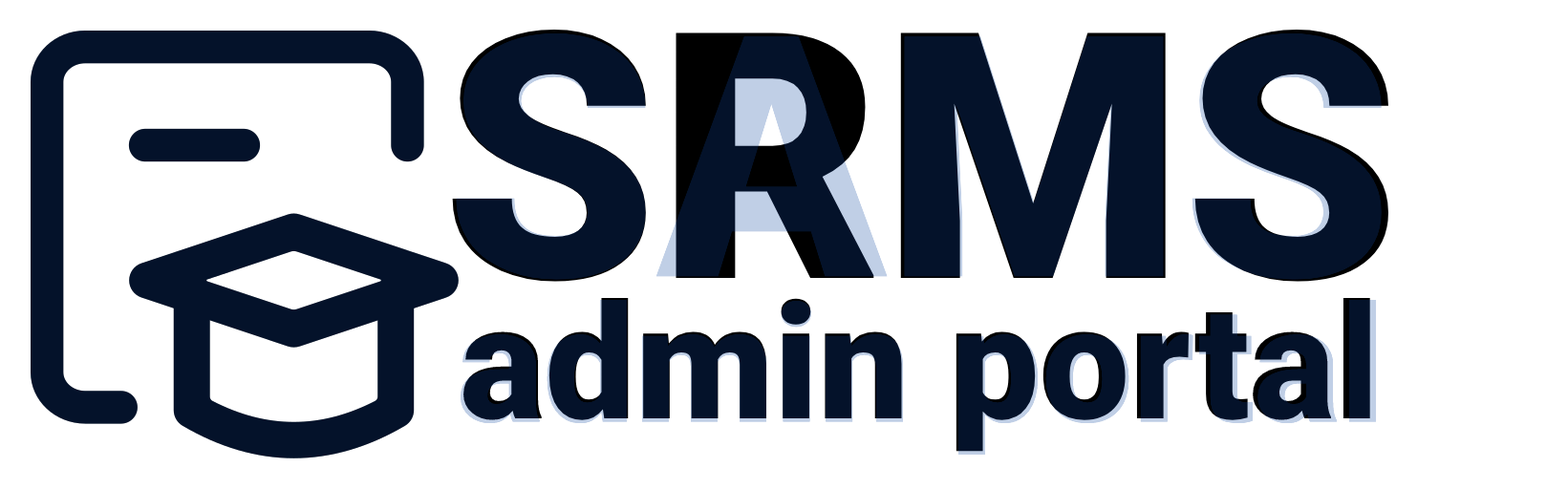
<style>
.page{position:relative;width:1568px;height:489px;background:#ffffff}
.page>*{position:absolute;margin:0}
.t1{font:344.6px "Roboto-Black";color:#04122a}
.t2{font:160.7px "Roboto-Black";color:#04122a}
</style>
<div class="page">
<p class="t1" style="left:452px;top:30px;width:936px;height:252px">SRMS</p>
<p class="t2" style="left:463px;top:298px;width:907px;height:154px">admin portal</p>
</div>
